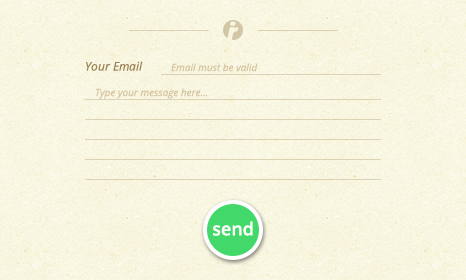
<style>
.page{position:relative;width:466px;height:280px}
.page>*{position:absolute;margin:0}
.t1{font:12px "OpenSans-Italic";color:#9a804e}
.t2{font:10px "OpenSans-Italic";color:#d5c3a0}
.t3{font:18px "OpenSans-Semibold";color:#fefefe}
</style>
<div class="page">
<p class="t1" style="left:86px;top:61px;width:57px;height:10px">Your Email</p>
<p class="t2" style="left:171px;top:63px;width:87px;height:9px">Email must be valid</p>
<p class="t2" style="left:95px;top:88px;width:112px;height:11px">Type your message here...</p>
<p class="t3" style="left:213px;top:221px;width:40px;height:15px">send</p>
</div>
